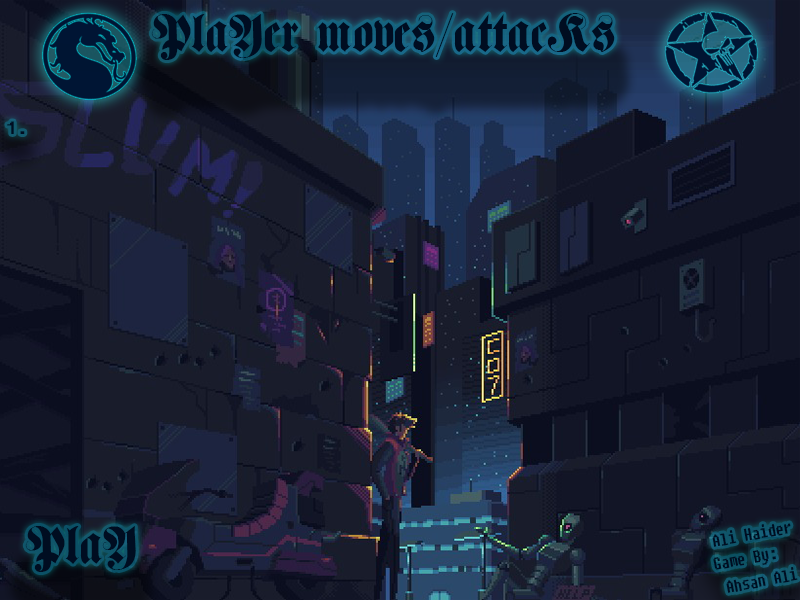
<style>
.page{position:relative;width:800px;height:600px}
.page>*{position:absolute;margin:0}
.t1{font:50px "FetteHaenelFraktur";color:#000d21}
.t2{font:17.9px "Fixedsys";color:#000d21;scale:0.93 1}
.t3{font:16.9px "Fixedsys";color:#000d21;scale:0.76 1}
.t4{font:16.9px/25.3px "Fixedsys";color:#000d21;scale:0.76 1}
</style>
<div class="page">
<p class="t1" style="left:151px;top:13px;width:464px;height:47px">PlaYer moves/attacKs</p>
<p class="t2" style="left:7px;top:121px;width:18px;height:13px">1.</p>
<p class="t1" style="left:25px;top:526px;width:111px;height:46px">PlaY</p>
<p class="t3" style="left:712px;top:523px;width:79px;height:24px;rotate:-10deg">Ali Haider</p>
<p class="t4" style="left:713px;top:549px;width:85px;height:44px;rotate:-11deg">Game By:<br> Ahsan Ali</p>
</div>
